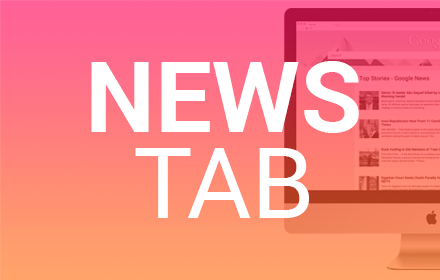
<style>
.page{position:relative;width:440px;height:280px}
.page>*{position:absolute;margin:0}
.t1{font:99.3px/85.3px "Roboto-Bold";color:#ffffff}
.t2{font:99.3px/85.3px "Roboto-Regular";color:#ffffff}
</style>
<div class="page">
<p class="t1" style="left:91px;top:61px;width:268px;height:157px;text-align:center">NEWS<br><span class="t2">TAB</span></p>
</div>
